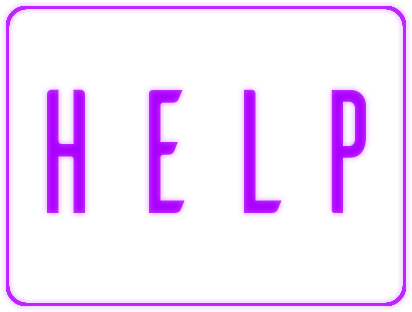
<style>
.page{position:relative;width:412px;height:312px;background:#ffffff}
.page>*{position:absolute;margin:0}
.t1{font:176px "Ailerons-Regular";color:#a900ff;scale:0.91 1}
</style>
<div class="page">
<p class="t1" style="left:47px;top:89px;width:319px;height:124px">help</p>
</div>
